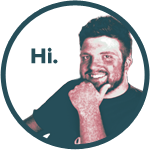
<style>
.page{position:relative;width:150px;height:151px;background:#ffffff}
.page>*{position:absolute;margin:0}
.t1{font:22px "ProximaNova-Extrabld";color:#264e59}
</style>
<div class="page">
<p class="t1" style="left:31px;top:47px;width:27px;height:17px">Hi.</p>
</div>
